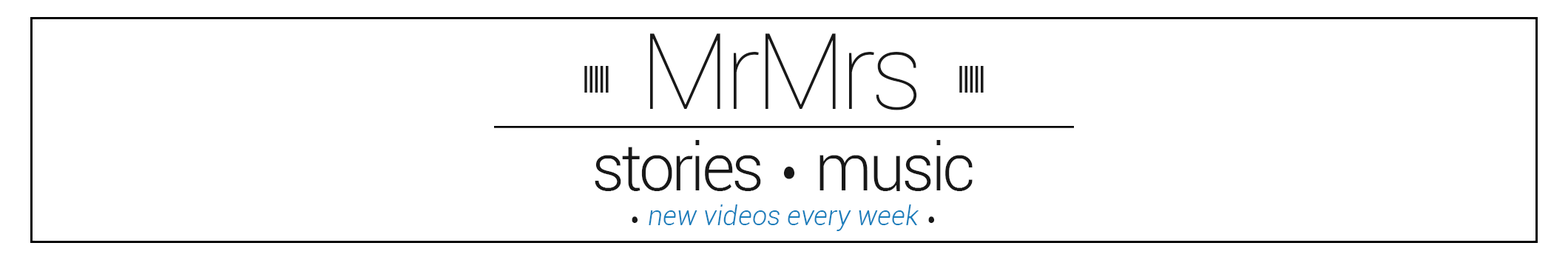
<style>
.page{position:relative;width:1568px;height:260px;background:#ffffff}
.page>*{position:absolute;margin:0}
.t1{font:105.7px "Roboto-Thin";letter-spacing:-0.05em;color:#181818}
.t2{font:147.9px "Prisma";letter-spacing:-0.05em;color:#181818}
.t3{font:65.2px "Roboto-Light";letter-spacing:-0.05em;color:#181818}
.t4{font:101.9px "Ming-Lt-HKSCS-UNI-H";letter-spacing:-0.05em;color:#181818}
.t5{font:26.9px "Roboto-LightItalic";color:#187dbb}
.t6{font:54px "Ming-Lt-HKSCS-UNI-H";letter-spacing:-0.05em;color:#181818}
</style>
<div class="page">
<p class="t1" style="left:649px;top:33px;width:268px;height:77px">MrMrs</p>
<p class="t2" style="left:584px;top:66px;width:400px;height:26px">.                   .</p>
<p class="t3" style="left:595px;top:140px;width:378px;height:51px">stories   music</p>
<p class="t4" style="left:783px;top:166px;width:12px;height:13px">.</p>
<p class="t5" style="left:649px;top:204px;width:270px;height:27px">new videos every week</p>
<p class="t6" style="left:632px;top:216px;width:6px;height:7px">.</p>
<p class="t6" style="left:928px;top:216px;width:6px;height:7px">.</p>
</div>
